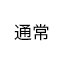
<style>
.page{position:relative;width:64px;height:64px;background:#ffffff}
.page>*{position:absolute;margin:0}
.t1{font:18px "HiraKakuPro-W3";color:#000000}
</style>
<div class="page">
<p class="t1" style="left:14px;top:24px;width:35px;height:17px">通常</p>
</div>
